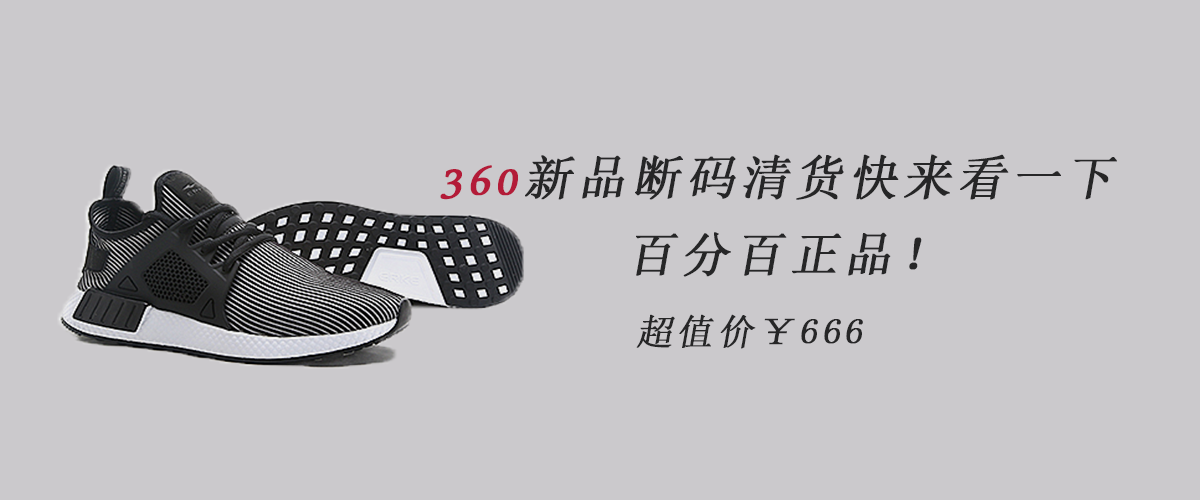
<style>
.page{position:relative;width:1200px;height:500px;background:#cbc9cc}
.page>*{position:absolute;margin:0}
.t1{font:48px "SimSun";letter-spacing:0.1em;color:#262627;text-transform:uppercase;font-weight:bold;font-style:italic}
.t2{font:60px "DaunPenh";letter-spacing:0.1em;color:#b31b38;text-transform:uppercase;font-weight:bold;font-style:italic}
.t3{font:36px "SimSun";letter-spacing:0.1em;color:#262627;text-transform:uppercase;font-weight:bold;font-style:italic}
</style>
<div class="page">
<p class="t1" style="left:440px;top:154px;width:677px;height:46px"><span class="t2">360</span>新品断码清货快来看一下</p>
<p class="t1" style="left:636px;top:232px;width:286px;height:45px">百分百正品！</p>
<p class="t3" style="left:636px;top:314px;width:227px;height:35px">超值价￥666</p>
</div>
